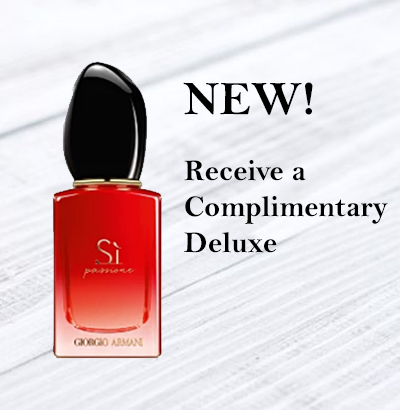
<style>
.page{position:relative;width:400px;height:410px}
.page>*{position:absolute;margin:0}
.t1{font:48px "BellMTBold";color:#000000}
.t2{font:30px "BellMTBold";color:#000000}
</style>
<div class="page">
<p class="t1" style="left:183px;top:82px;width:130px;height:33px">NEW!</p>
<p class="t2" style="left:184px;top:160px;width:204px;height:93px">Receive a <br>Complimentary<br>Deluxe</p>
</div>
